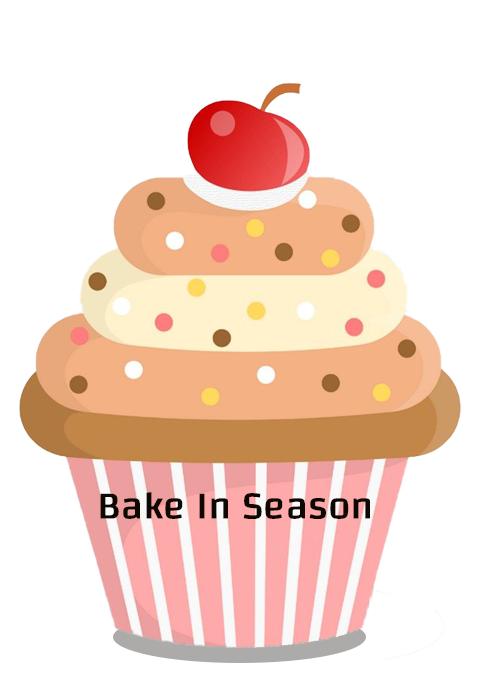
<style>
.page{position:relative;width:480px;height:700px;background:#ffffff}
.page>*{position:absolute;margin:0}
.t1{font:38.9px "Changa-Regular";color:#0f0802;font-weight:bold}
</style>
<div class="page">
<p class="t1" style="left:100px;top:492px;width:270px;height:27px">Bake In Season</p>
</div>
